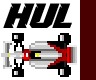
<style>
.page{position:relative;width:96px;height:80px;background:#ffffff}
.page>*{position:absolute;margin:0}
.t1{font:34px "RushDriver-Italic";color:#000000}
</style>
<div class="page">
<p class="t1" style="left:3px;top:3px;width:69px;height:25px">HUL</p>
</div>
